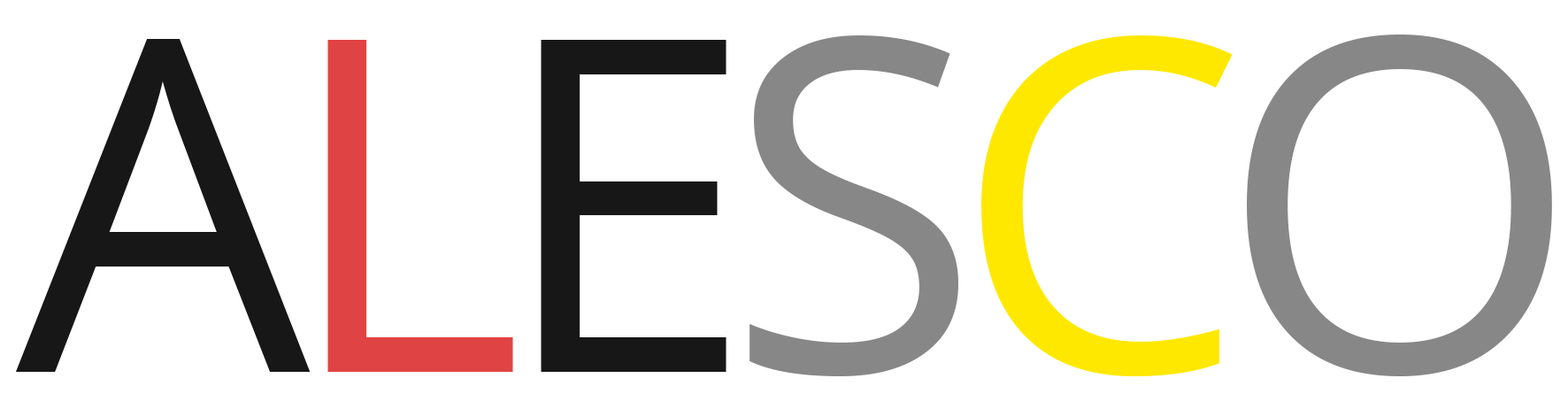
<style>
.page{position:relative;width:1568px;height:409px;background:#ffffff}
.page>*{position:absolute;margin:0}
.t1{font:464.6px "OpenSans-Regular";letter-spacing:-0.06em;color:#171717}
.t2{font:464.6px "OpenSans-Regular";letter-spacing:-0.06em;color:#e04343}
.t3{font:464.6px "OpenSans-Regular";letter-spacing:-0.06em;color:#878787}
.t4{font:464.6px "OpenSans-Regular";letter-spacing:-0.06em;color:#ffe800}
</style>
<div class="page">
<p class="t1" style="left:16px;top:35px;width:1536px;height:341px">A<span class="t2">L</span>E<span class="t3">S</span><span class="t4">C</span><span class="t3">O</span></p>
</div>
